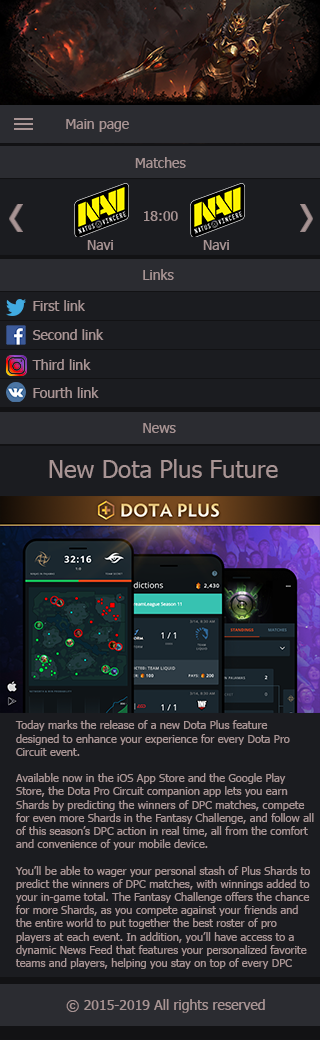
<style>
.page{position:relative;width:320px;height:1040px;background:#1b1c20}
.page>*{position:absolute;margin:0}
.t1{font:14px "Tahoma";color:#a89494}
.t2{font:24px "Tahoma";color:#a89494}
.t3{font:11px "Tahoma";color:#a89494}
</style>
<div class="page">
<p class="t1" style="left:66px;top:119px;width:63px;height:13px">Main page</p>
<p class="t1" style="left:135px;top:157px;width:51px;height:11px">Matches</p>
<p class="t1" style="left:144px;top:211px;width:34px;height:10px">18:00</p>
<p class="t1" style="left:87px;top:240px;width:26px;height:10px">Navi</p>
<p class="t1" style="left:203px;top:240px;width:26px;height:10px">Navi</p>
<p class="t1" style="left:143px;top:269px;width:31px;height:11px">Links</p>
<p class="t1" style="left:33px;top:300px;width:52px;height:11px">First link</p>
<p class="t1" style="left:33px;top:329px;width:71px;height:11px">Second link</p>
<p class="t1" style="left:32px;top:359px;width:59px;height:11px">Third link</p>
<p class="t1" style="left:33px;top:387px;width:66px;height:11px">Fourth link</p>
<p class="t1" style="left:143px;top:423px;width:33px;height:10px">News</p>
<p class="t2" style="left:49px;top:459px;width:229px;height:19px">New Dota Plus Future</p>
<p class="t3" style="left:15px;top:720px;width:299px;height:249px">Today marks the release of a new Dota Plus feature designed to enhance your experience for every Dota Pro Circuit event.<br><br>Available now in the iOS App Store and the Google Play Store, the Dota Pro Circuit companion app lets you earn Shards by predicting the winners of DPC matches, compete for even more Shards in the Fantasy Challenge, and follow all of this season’s DPC action in real time, all from the comfort and convenience of your mobile device.<br><br>You’ll be able to wager your personal stash of Plus Shards to predict the winners of DPC matches, with winnings added to your in-game total. The Fantasy Challenge offers the chance for more Shards, as you compete against your friends and the entire world to put together the best roster of pro players at each event. In addition, you’ll have access to a dynamic News Feed that features your personalized favorite teams and players, helping you stay on top of every DPC development along the road to The International.</p>
<p class="t1" style="left:66px;top:999px;width:199px;height:14px">© 2015-2019 All rights reserved</p>
</div>
